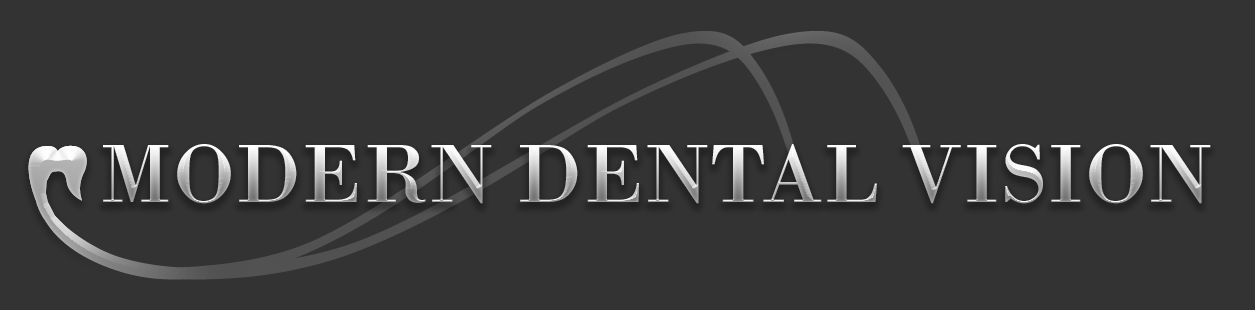
<style>
.page{position:relative;width:1255px;height:310px;background:#333333}
.page>*{position:absolute;margin:0}
.t1{font:87.1px "BodoniMT"}
</style>
<div class="page">
<p class="t1" style="left:103px;top:144px;width:1108px;height:60px">MODERN DENTAL VISION</p>
</div>
